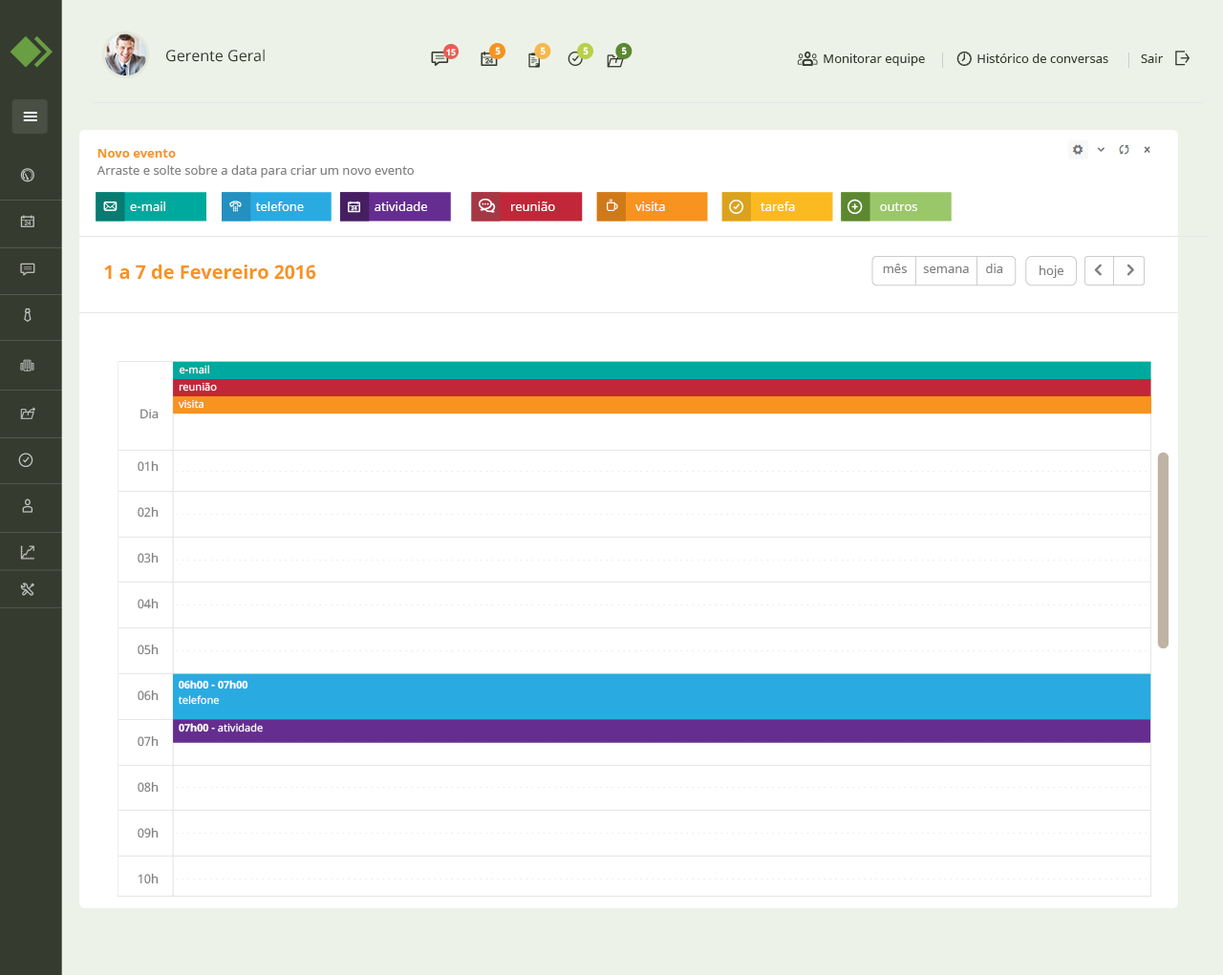
<style>
.page{position:relative;width:1223px;height:975px;background:#ffffff}
.page>*{position:absolute;margin:0}
.t1{font:15.3px "NotoSans";color:#353b2f}
.t2{font:8.6px "NotoSans-Bold";color:#ffffff}
.t3{font:9.6px "NotoSans-Bold";color:#ffffff}
.t4{font:12.4px "NotoSans";color:#353b2f}
.t5{font:12.4px "NotoSans-Bold";color:#f7931e}
.t6{font:12.4px "NotoSans";color:#808080}
.t7{font:12.4px "NotoSans";color:#ffffff}
.t8{font:19.1px "NotoSans-Bold";color:#f7931e}
.t9{font:10.5px "NotoSans";color:#ffffff}
.t10{font:12.4px/45.8px "NotoSans";color:#808080}
.t11{font:12.4px/52.5px "NotoSans";color:#808080}
.t12{font:10.5px/15.3px "NotoSans-Bold";color:#ffffff}
.t13{font:10.5px/15.3px "NotoSans";color:#ffffff}
.t14{font:10.5px "NotoSans-Bold";color:#ffffff}
</style>
<div class="page">
<p class="t1" style="left:166px;top:49px;width:99px;height:13px">Gerente Geral</p>
<p class="t2" style="left:446px;top:49px;width:10px;height:7px">15</p>
<p class="t3" style="left:495px;top:47px;width:6px;height:8px">5</p>
<p class="t3" style="left:541px;top:47px;width:4px;height:8px">5</p>
<p class="t3" style="left:583px;top:47px;width:5px;height:8px">5</p>
<p class="t3" style="left:622px;top:47px;width:5px;height:8px">5</p>
<p class="t4" style="left:823px;top:53px;width:339px;height:13px">Monitorar equipe                Histórico de conversas          Sair</p>
<p class="t5" style="left:97px;top:149px;width:79px;height:9px">Novo evento</p>
<p class="t6" style="left:96px;top:165px;width:318px;height:13px">Arraste e solte sobre a data para criar um novo evento</p>
<p class="t7" style="left:130px;top:202px;width:35px;height:9px">e-mail</p>
<p class="t7" style="left:255px;top:202px;width:49px;height:9px">telefone</p>
<p class="t7" style="left:374px;top:202px;width:53px;height:9px">atividade</p>
<p class="t7" style="left:511px;top:202px;width:44px;height:9px">reunião</p>
<p class="t7" style="left:635px;top:202px;width:30px;height:9px">visita</p>
<p class="t7" style="left:760px;top:202px;width:35px;height:9px">tarefa</p>
<p class="t7" style="left:880px;top:203px;width:37px;height:8px">outros</p>
<p class="t8" style="left:104px;top:265px;width:212px;height:15px">1 a 7 de Fevereiro 2016</p>
<p class="t6" style="left:883px;top:264px;width:120px;height:9px">mês     semana     dia</p>
<p class="t6" style="left:1039px;top:266px;width:24px;height:12px">hoje</p>
<p class="t9" style="left:179px;top:365px;width:30px;height:9px">e-mail</p>
<p class="t9" style="left:179px;top:382px;width:38px;height:10px">reunião</p>
<p class="t9" style="left:178px;top:399px;width:25px;height:10px">visita</p>
<p class="t10" style="left:138px;top:409px;width:21px;height:476px;text-align:right"><span class="t11">Dia<br>01h<br></span>02h<br>03h<br>04h<br>05h<br>06h<br>07h<br>08h<br>09h<br>10h</p>
<p class="t12" style="left:178px;top:680px;width:70px;height:25px">06h00 - 07h00<br><span class="t13">telefone</span></p>
<p class="t9" style="left:179px;top:723px;width:84px;height:10px"><span class="t14">07h00</span> - atividade</p>
</div>
